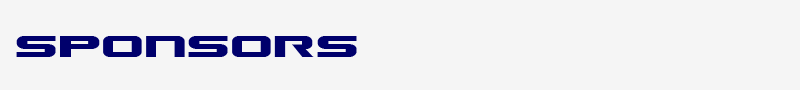
<style>
.page{position:relative;width:800px;height:90px;background:#f5f5f5}
.page>*{position:absolute;margin:0}
.t1{font:33.2px "Gunship";color:#00006c;scale:1.24 1}
</style>
<div class="page">
<p class="t1" style="left:16px;top:36px;width:341px;height:21px">Sponsors</p>
</div>
